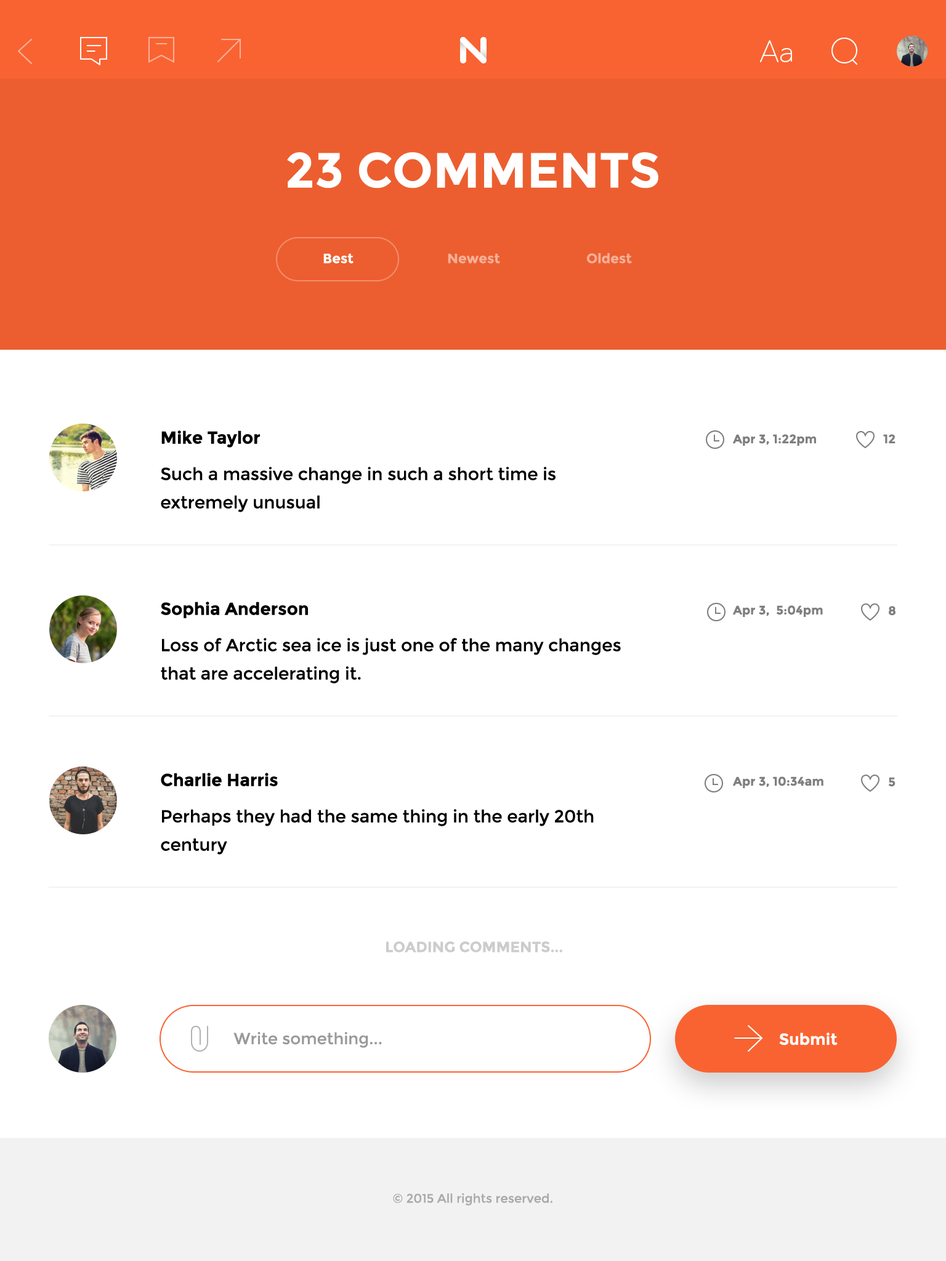
<style>
.page{position:relative;width:946px;height:1261px;background:#ffffff}
.page>*{position:absolute;margin:0}
.t1{font:49.3px "Montserrat-Bold";color:#ffffff}
.t2{font:13.5px "Montserrat-Bold";color:#ffffff}
.t3{font:13.5px "Montserrat-Bold";color:#f6af97}
.t4{font:17.2px "Montserrat-Bold";color:#000000}
.t5{font:12.3px "Montserrat-Bold";color:#7f7f7f}
.t6{font:17.2px/28.3px "Montserrat-Regular";color:#000000}
.t7{font:14.8px "Montserrat-Bold";color:#cccccc}
.t8{font:16px "Montserrat-Regular";color:#999999}
.t9{font:16px "Montserrat-Bold";color:#ffffff}
.t10{font:12.3px "Montserrat-Regular";color:#a9a9a9}
</style>
<div class="page">
<p class="t1" style="left:287px;top:152px;width:371px;height:36px">23 COMMENTS</p>
<p class="t2" style="left:323px;top:254px;width:30px;height:10px">Best</p>
<p class="t3" style="left:448px;top:254px;width:52px;height:10px">Newest</p>
<p class="t3" style="left:587px;top:253px;width:45px;height:11px">Oldest</p>
<p class="t4" style="left:161px;top:430px;width:99px;height:18px">Mike Taylor</p>
<p class="t5" style="left:733px;top:434px;width:83px;height:12px">Apr 3, 1:22pm</p>
<p class="t5" style="left:883px;top:434px;width:12px;height:9px">12</p>
<p class="t6" style="left:161px;top:467px;width:394px;height:45px">Such a massive change in such a short time is<br>extremely unusual</p>
<p class="t4" style="left:161px;top:602px;width:147px;height:16px">Sophia Anderson</p>
<p class="t5" style="left:733px;top:605px;width:90px;height:12px">Apr 3,  5:04pm</p>
<p class="t5" style="left:888px;top:606px;width:7px;height:10px">8</p>
<p class="t6" style="left:161px;top:638px;width:460px;height:45px">Loss of Arctic sea ice is just one of the many changes<br>that are accelerating it.</p>
<p class="t4" style="left:161px;top:773px;width:117px;height:13px">Charlie Harris</p>
<p class="t5" style="left:733px;top:776px;width:90px;height:12px">Apr 3, 10:34am</p>
<p class="t5" style="left:888px;top:777px;width:7px;height:10px">5</p>
<p class="t6" style="left:161px;top:809px;width:433px;height:46px">Perhaps they had the same thing in the early 20th<br>century</p>
<p class="t7" style="left:386px;top:941px;width:176px;height:11px">LOADING COMMENTS...</p>
<p class="t8" style="left:233px;top:1032px;width:149px;height:16px">Write something...</p>
<p class="t9" style="left:779px;top:1032px;width:58px;height:13px">Submit</p>
<p class="t10" style="left:393px;top:1193px;width:159px;height:13px">© 2015 All rights reserved.</p>
</div>
